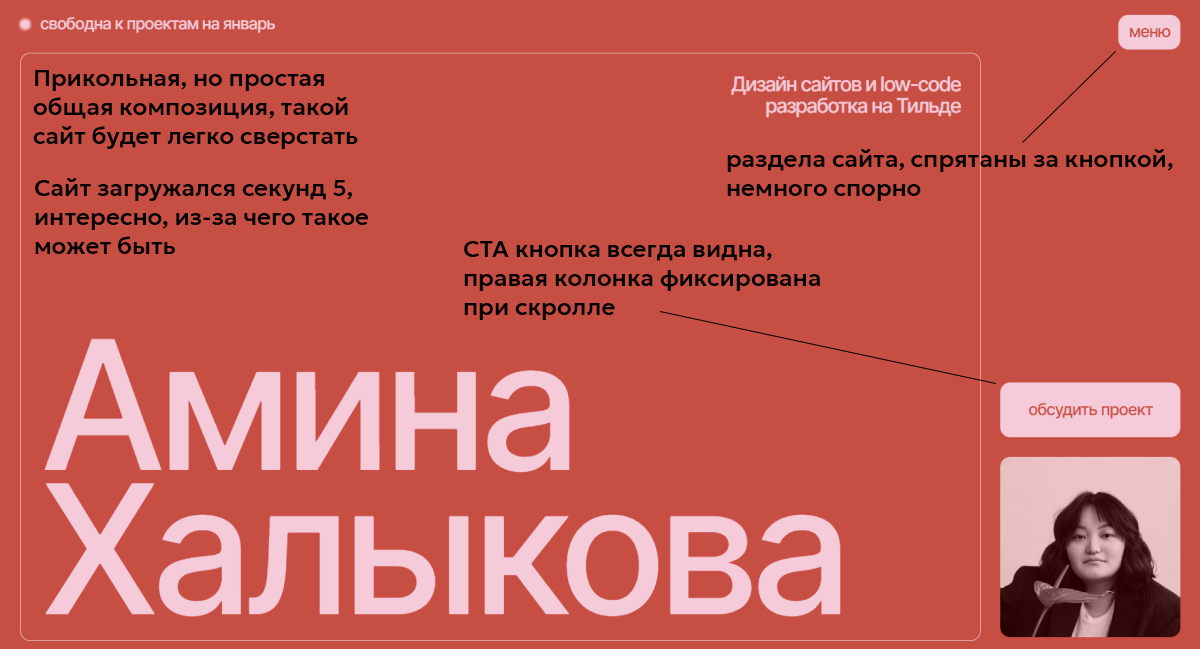
<style>
.page{position:relative;width:1200px;height:649px;background:#c74e43}
.page>*{position:absolute;margin:0}
.t1{font:24px "Geologica-Medium";color:#000000}
</style>
<div class="page">
<p class="t1" style="left:33px;top:70px;width:325px;height:79px">Прикольная, но простая<br>общая композиция, такой<br>сайт будет легко сверстать</p>
<p class="t1" style="left:727px;top:149px;width:446px;height:52px">раздела сайта, спрятаны за кнопкой,<br>немного спорно</p>
<p class="t1" style="left:35px;top:178px;width:334px;height:76px">Сайт загружался секунд 5, <br>интересно, из-за чего такое<br>может быть</p>
<p class="t1" style="left:464px;top:241px;width:356px;height:79px">CTA кнопка всегда видна,<br>правая колонка фиксирована <br>при скролле</p>
</div>
